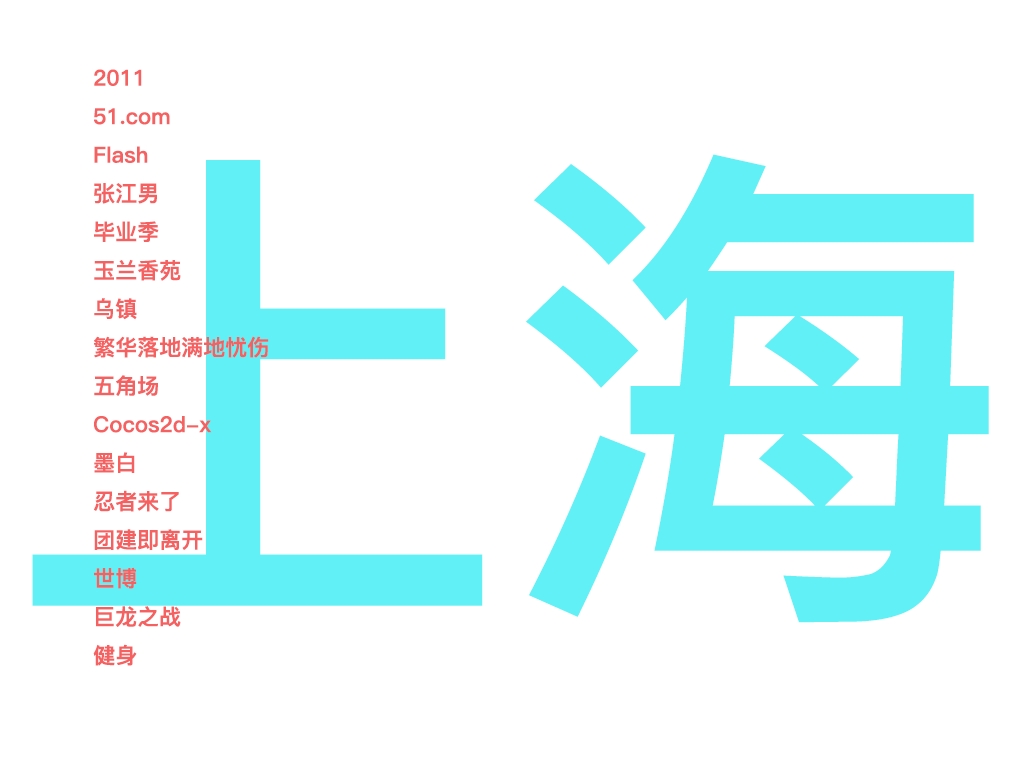
<style>
.page{position:relative;width:1024px;height:768px;background:#ffffff}
.page>*{position:absolute;margin:0}
.t1{font:22px "PingFang-SC-Heavy";color:#f56161}
.t2{font:500px "PingFang-SC-Heavy";color:#61f0f5}
</style>
<div class="page">
<p class="t1" style="left:93px;top:69px;width:176px;height:597px">2011<br>51.com<br>Flash<br>张江男<br>毕业季<br>玉兰香苑<br>乌镇<br>繁华落地满地忧伤<br>五角场<br>Cocos2d-x<br>墨白<br>忍者来了<br>团建即离开<br>世博<br>巨龙之战<br>健身</p>
<p class="t2" style="left:32px;top:154px;width:957px;height:469px">上海</p>
</div>
